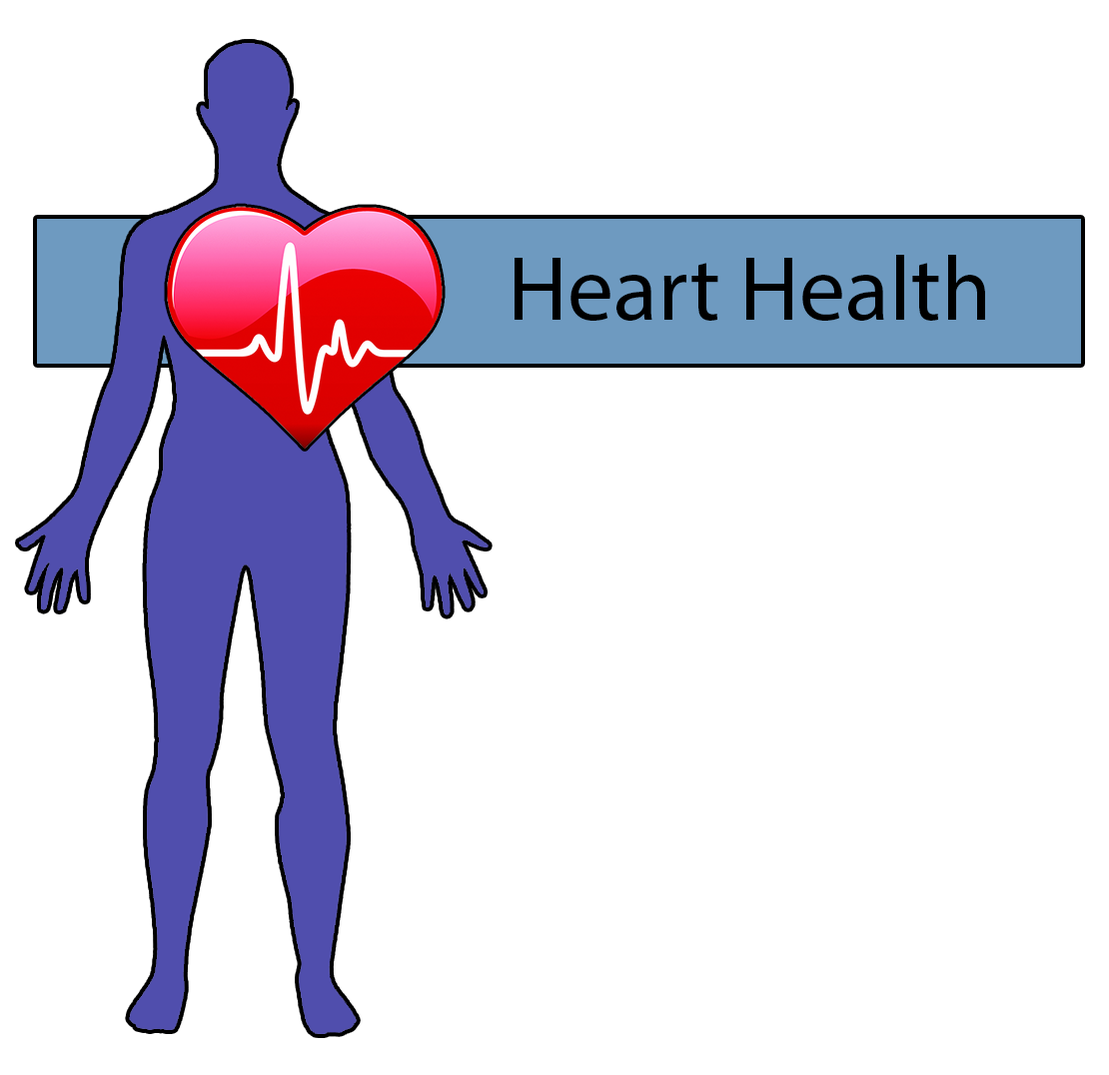
<style>
.page{position:relative;width:1109px;height:1075px;background:#ffffff}
.page>*{position:absolute;margin:0}
.t1{font:91.6px "MyriadPro-Regular";color:#000000}
</style>
<div class="page">
<p class="t1" style="left:515px;top:255px;width:470px;height:66px">Heart Health</p>
</div>
